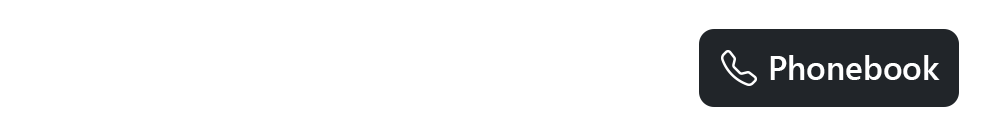
<style>
.page{position:relative;width:1000px;height:140px;background:#ffffff}
.page>*{position:absolute;margin:0}
.t1{font:32.9px "SegoeUI-Semibold";color:#ffffff}
</style>
<div class="page">
<p class="t1" style="left:770px;top:55px;width:170px;height:25px">Phonebook</p>
</div>
